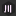
<style>
.page{position:relative;width:16px;height:16px;background:#333333}
.page>*{position:absolute;margin:0}
.t1{font:7.9px "AdobeFanHeitiStd-Bold";color:#ffe9ff}
</style>
<div class="page">
<p class="t1" style="left:4px;top:5px;width:8px;height:8px">川</p>
</div>
